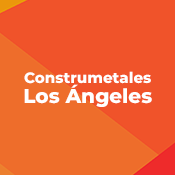
<style>
.page{position:relative;width:175px;height:175px;background:#f0532a}
.page>*{position:absolute;margin:0}
.t1{font:15px/20.3px "Montserrat-ExtraBold";color:#ffffff}
.t2{font:20px/20.3px "Montserrat-ExtraBold";color:#ffffff}
</style>
<div class="page">
<p class="t1" style="left:24px;top:71px;width:128px;height:36px;text-align:center">Construmetales<br><span class="t2">Los Ángeles</span></p>
</div>
